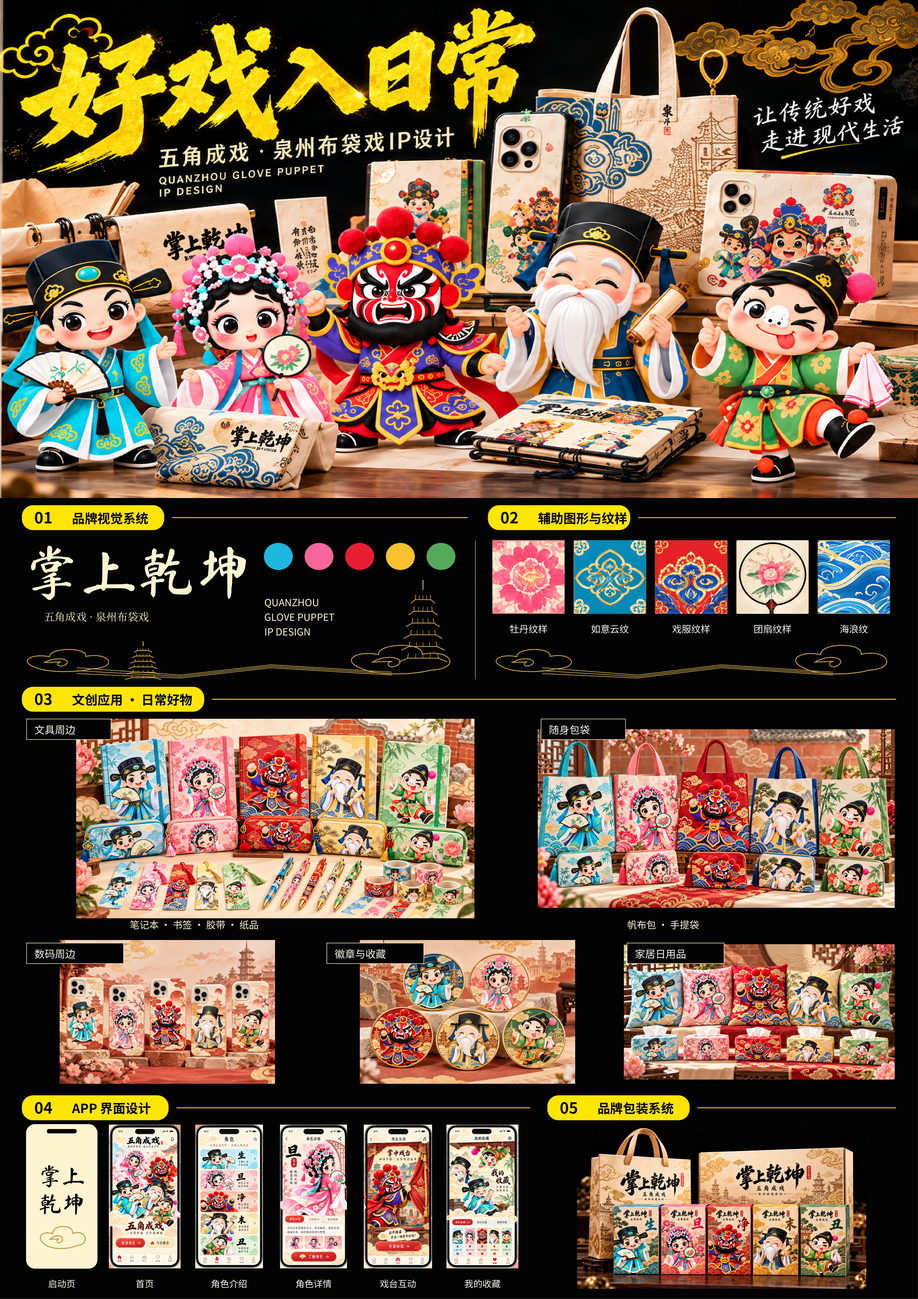
<style>
.page{position:relative;width:918px;height:1299px}
.page>*{position:absolute;margin:0}
.t1{font:15.4px "NotoSansSC-Bold";color:#030403}
.t2{font:12.7px "NotoSansSC-Bold";color:#030403}
.t3{font:57.1px "MaShanZheng-Regular";color:#fff5d1}
.t4{font:9.8px "NotoSansSC-Regular";color:#fff5d1}
.t5{font:10.7px "NotoSerifSC-Regular";color:#fff5d1}
.t6{font:9.5px "NotoSansSC-Regular";color:#f7f5e6}
.t7{font:10.2px "NotoSansSC-Regular";color:#f7f5e6}
.t8{font:9.7px "NotoSansSC-Regular";color:#fff5d1}
.t9{font:23.4px "MaShanZheng-Regular";color:#030403}
.t10{font:9.1px "NotoSansSC-Regular";color:#f7f5e6}
</style>
<div class="page">
<p class="t1" style="left:35px;top:511px;width:17px;height:13px">01</p>
<p class="t2" style="left:73px;top:512px;width:75px;height:12px">品牌视觉系统</p>
<p class="t1" style="left:501px;top:511px;width:17px;height:13px">02</p>
<p class="t2" style="left:538px;top:512px;width:89px;height:12px">辅助图形与纹样</p>
<p class="t3" style="left:31px;top:545px;width:215px;height:55px">掌上乾坤</p>
<p class="t4" style="left:265px;top:599px;width:53px;height:9px">QUANZHOU</p>
<p class="t5" style="left:44px;top:611px;width:105px;height:11px">五角成戏 · 泉州布袋戏</p>
<p class="t4" style="left:265px;top:613px;width:70px;height:8px">GLOVE PUPPET</p>
<p class="t4" style="left:265px;top:628px;width:45px;height:8px">IP DESIGN</p>
<p class="t6" style="left:510px;top:624px;width:37px;height:9px">牡丹纹样</p>
<p class="t6" style="left:591px;top:624px;width:38px;height:9px">如意云纹</p>
<p class="t6" style="left:672px;top:624px;width:38px;height:9px">戏服纹样</p>
<p class="t6" style="left:754px;top:624px;width:37px;height:9px">团扇纹样</p>
<p class="t6" style="left:840px;top:624px;width:28px;height:9px">海浪纹</p>
<p class="t1" style="left:35px;top:693px;width:17px;height:12px">03</p>
<p class="t2" style="left:72px;top:693px;width:120px;height:13px">文创应用 · 日常好物</p>
<p class="t7" style="left:35px;top:725px;width:40px;height:9px">文具周边</p>
<p class="t7" style="left:550px;top:725px;width:40px;height:9px">随身包袋</p>
<p class="t8" style="left:130px;top:920px;width:128px;height:9px">笔记本 · 书签 · 胶带 · 纸品</p>
<p class="t8" style="left:628px;top:920px;width:71px;height:9px">帆布包 · 手提袋</p>
<p class="t7" style="left:35px;top:949px;width:40px;height:10px">数码周边</p>
<p class="t7" style="left:335px;top:949px;width:51px;height:10px">徽章与收藏</p>
<p class="t7" style="left:636px;top:949px;width:50px;height:10px">家居日用品</p>
<p class="t1" style="left:35px;top:1101px;width:17px;height:13px">04</p>
<p class="t2" style="left:72px;top:1102px;width:79px;height:12px">APP 界面设计</p>
<p class="t1" style="left:560px;top:1101px;width:17px;height:13px">05</p>
<p class="t2" style="left:598px;top:1102px;width:76px;height:12px">品牌包装系统</p>
<p class="t9" style="left:41px;top:1165px;width:43px;height:22px">掌上</p>
<p class="t9" style="left:40px;top:1193px;width:43px;height:22px">乾坤</p>
<p class="t10" style="left:48px;top:1279px;width:27px;height:9px">启动页</p>
<p class="t10" style="left:136px;top:1279px;width:17px;height:9px">首页</p>
<p class="t10" style="left:212px;top:1279px;width:35px;height:9px">角色介绍</p>
<p class="t10" style="left:296px;top:1279px;width:36px;height:9px">角色详情</p>
<p class="t10" style="left:380px;top:1279px;width:36px;height:9px">戏台互动</p>
<p class="t10" style="left:465px;top:1279px;width:35px;height:9px">我的收藏</p>
</div>
